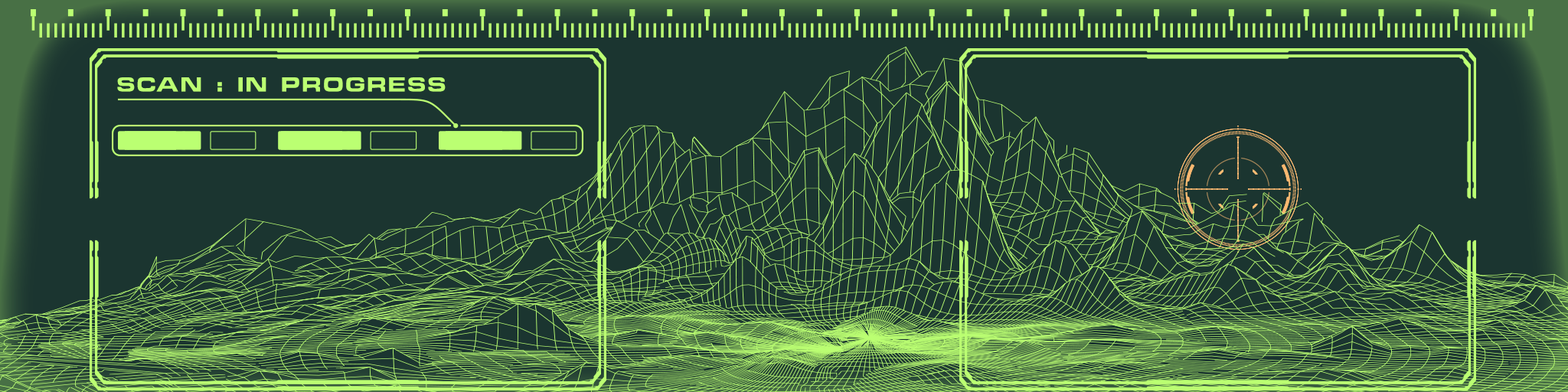
<style>
.page{position:relative;width:1568px;height:392px;background:#1b3530}
.page>*{position:absolute;margin:0}
.t1{font:18.7px "ChinoCapsSSK";letter-spacing:0.12em;color:#bbff72}
</style>
<div class="page">
<p class="t1" style="left:117px;top:77px;width:329px;height:15px">SCAN : IN PROGRESS</p>
</div>
